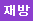
<style>
.page{position:relative;width:33px;height:21px;background:#8c3ecf}
.page>*{position:absolute;margin:0}
.t1{font:12px "Dotum";color:#ffffff;font-weight:bold}
</style>
<div class="page">
<p class="t1" style="left:4px;top:5px;width:26px;height:11px">재방</p>
</div>
